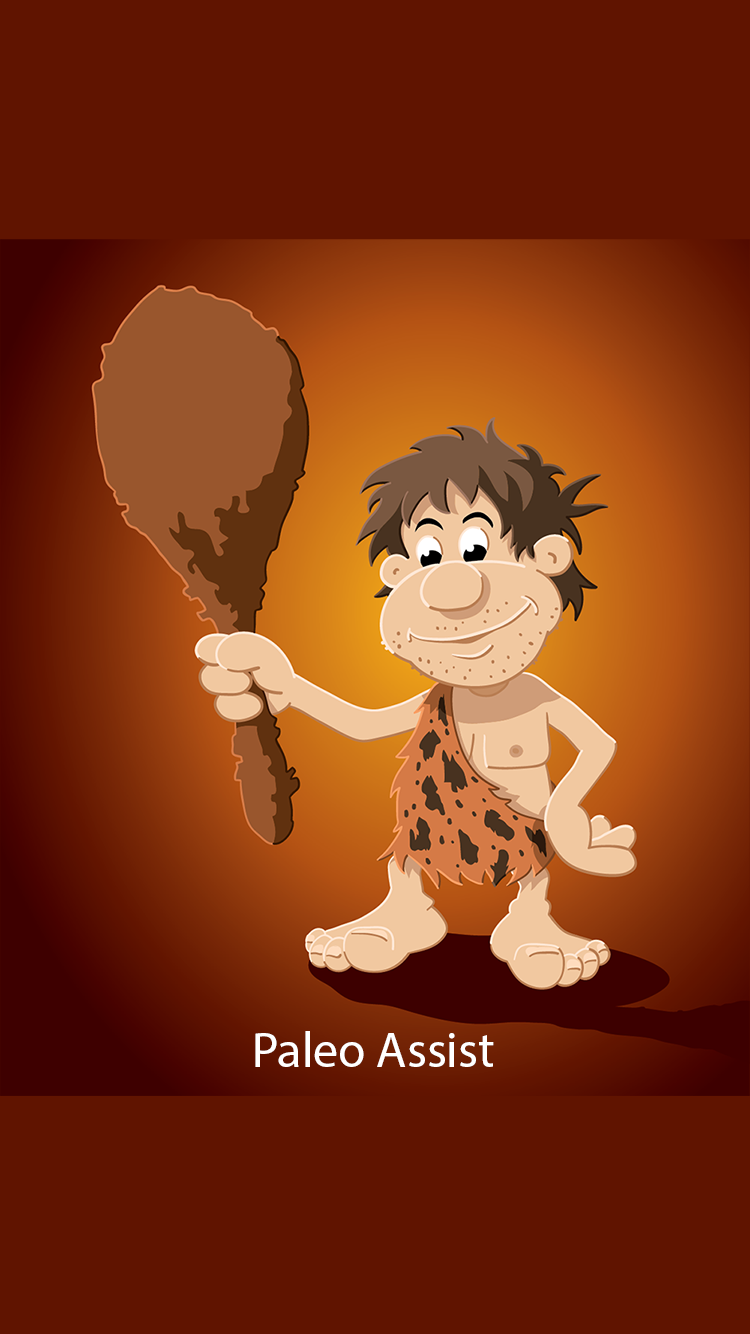
<style>
.page{position:relative;width:750px;height:1334px;background:#601400}
.page>*{position:absolute;margin:0}
.t1{font:12px "MyriadPro-Regular";color:#ffffff}
</style>
<div class="page">
<p class="t1" style="left:255px;top:1031px;width:239px;height:36px">Paleo Assist</p>
</div>
